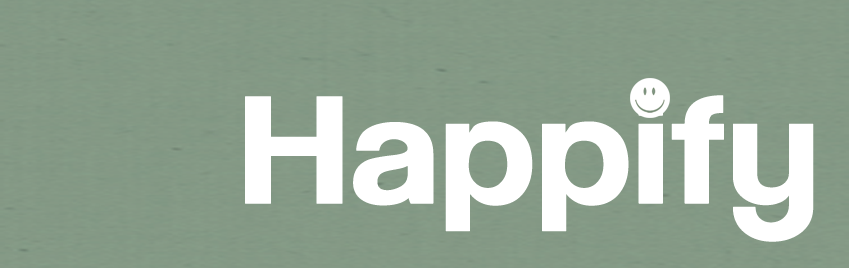
<style>
.page{position:relative;width:849px;height:268px}
.page>*{position:absolute;margin:0}
.t1{font:148px "Coolvetica";color:#ffffff;font-weight:bold;scale:1.12 1}
</style>
<div class="page">
<p class="t1" style="left:245px;top:95px;width:569px;height:147px">Happify</p>
</div>
